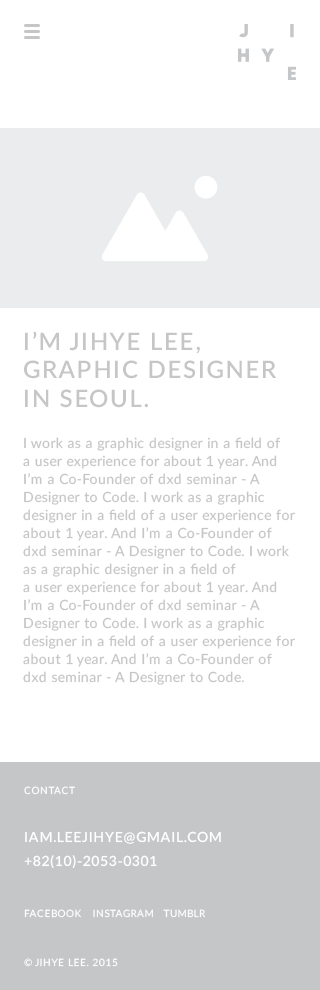
<style>
.page{position:relative;width:320px;height:990px;background:#ffffff}
.page>*{position:absolute;margin:0}
.t1{font:24px "Lato-Semibold";letter-spacing:0.075em;color:#c6c6c6}
.t2{font:14px/18px "Lato-Regular";letter-spacing:0.025em;color:#c6c6c6}
.t3{font:14px/24px "Lato-Semibold";letter-spacing:0.05em;color:#ffffff}
.t4{font:10px/24px "Lato-Regular";letter-spacing:0.05em;color:#ffffff}
.t5{font:10px "Lato-Regular";letter-spacing:0.05em;color:#ffffff}
</style>
<div class="page">
<p class="t1" style="left:24px;top:331px;width:252px;height:77px">I’M JIHYE LEE,<br>GRAPHIC DESIGNER<br>IN SEOUL.</p>
<p class="t2" style="left:23px;top:437px;width:272px;height:248px">I work as a graphic designer in a field of<br>a user experience for about 1 year. And<br>I’m a Co-Founder of dxd seminar - A<br>Designer to Code. I work as a graphic<br>designer in a field of a user experience for<br>about 1 year. And I’m a Co-Founder of<br>dxd seminar - A Designer to Code. I work<br>as a graphic designer in a field of<br>a user experience for about 1 year. And<br>I’m a Co-Founder of dxd seminar - A<br>Designer to Code. I work as a graphic<br>designer in a field of a user experience for<br>about 1 year. And I’m a Co-Founder of<br>dxd seminar - A Designer to Code.</p>
<p class="t3" style="left:24px;top:786px;width:197px;height:82px"><span class="t4">CONTACT<br><br></span>IAM.LEEJIHYE@GMAIL.COM<br>+82(10)-2053-0301</p>
<p class="t5" style="left:24px;top:909px;width:182px;height:9px">FACEBOOK   INSTAGRAM   TUMBLR</p>
<p class="t5" style="left:24px;top:958px;width:94px;height:9px">© JIHYE LEE. 2015</p>
</div>
